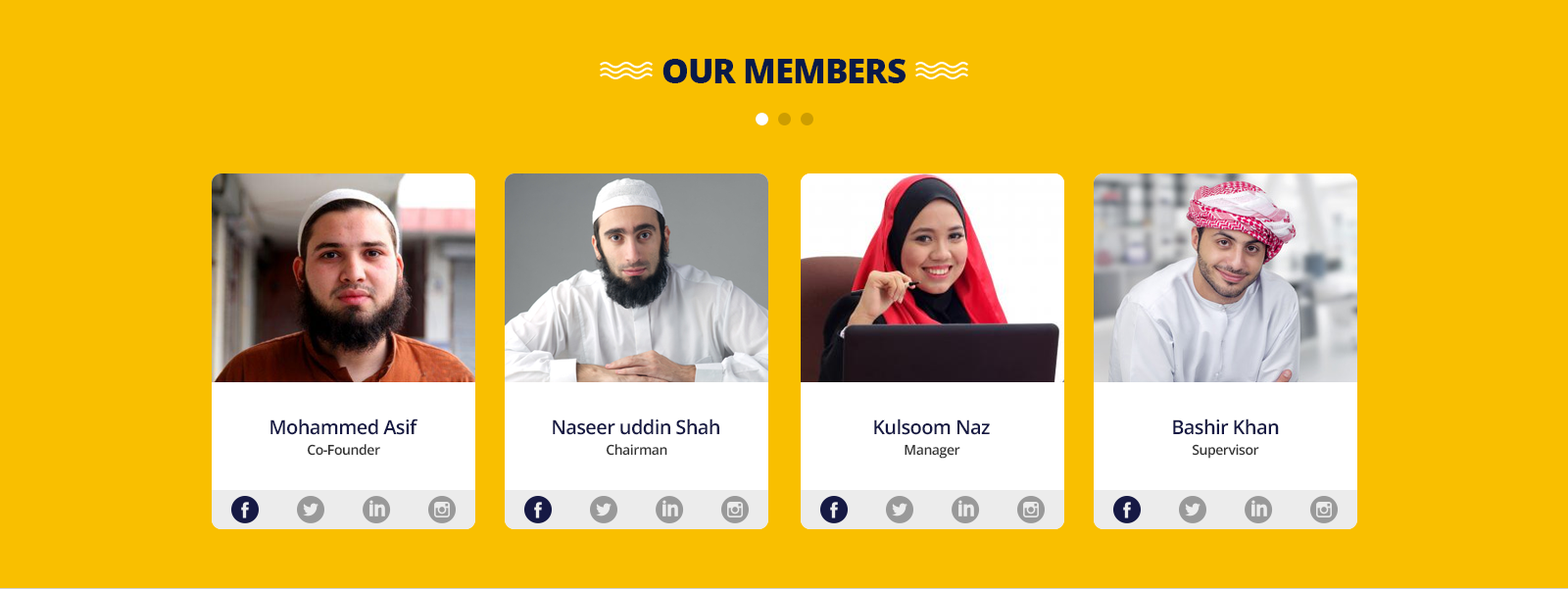
<style>
.page{position:relative;width:1568px;height:589px;background:#f9bf00}
.page>*{position:absolute;margin:0}
.t1{font:34.3px "OpenSans-Extrabold";letter-spacing:-0.03em;color:#091a48;text-transform:uppercase}
.t2{font:19.6px "OpenSans-Semibold";letter-spacing:-0.03em;color:#161944}
.t3{font:13.7px "OpenSans-Semibold";letter-spacing:-0.03em;color:#333333}
</style>
<div class="page">
<p class="t1" style="left:662px;top:59px;width:244px;height:24px">our members</p>
<p class="t2" style="left:270px;top:418px;width:148px;height:17px">Mohammed Asif</p>
<p class="t2" style="left:553px;top:418px;width:166px;height:17px">Naseer uddin Shah</p>
<p class="t2" style="left:874px;top:418px;width:116px;height:17px">Kulsoom Naz</p>
<p class="t2" style="left:1173px;top:418px;width:106px;height:17px">Bashir Khan</p>
<p class="t3" style="left:307px;top:444px;width:73px;height:12px">Co-Founder</p>
<p class="t3" style="left:606px;top:444px;width:61px;height:12px">Chairman</p>
<p class="t3" style="left:905px;top:444px;width:55px;height:15px">Manager</p>
<p class="t3" style="left:1192px;top:444px;width:67px;height:15px">Supervisor</p>
</div>
